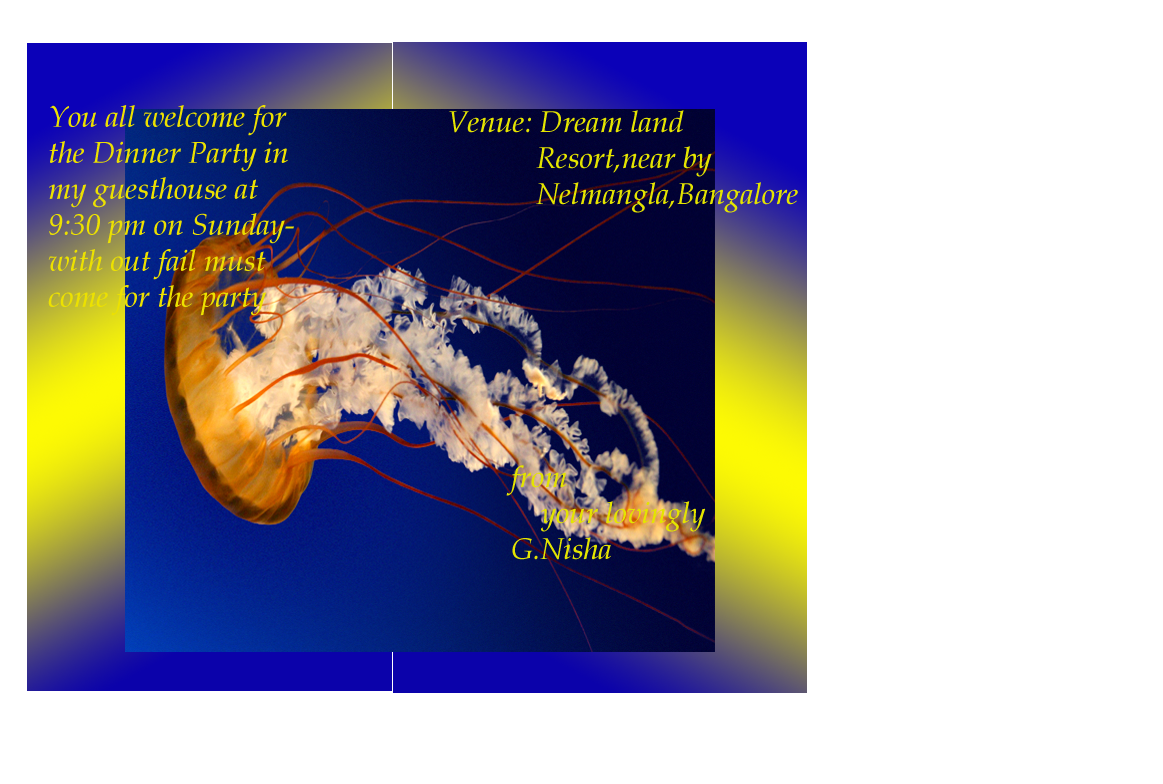
<style>
.page{position:relative;width:1163px;height:784px;background:#ffffff}
.page>*{position:absolute;margin:0}
.t1{font:30px "BookAntiqua-Italic";color:#ece100}
.t2{font:30px "BookAntiqua-Italic";color:#e4e400}
</style>
<div class="page">
<p class="t1" style="left:48px;top:105px;width:246px;height:211px">You all welcome for the Dinner Party in my guesthouse at   9:30 pm on Sundaywith out fail must come for the party</p>
<p class="t2" style="left:449px;top:110px;width:349px;height:103px">Venue: Dream land<br>            Resort,near by <br>            Nelmangla,Bangalore</p>
<p class="t2" style="left:506px;top:465px;width:200px;height:95px">from<br>    your lovingly<br>G.Nisha</p>
</div>
